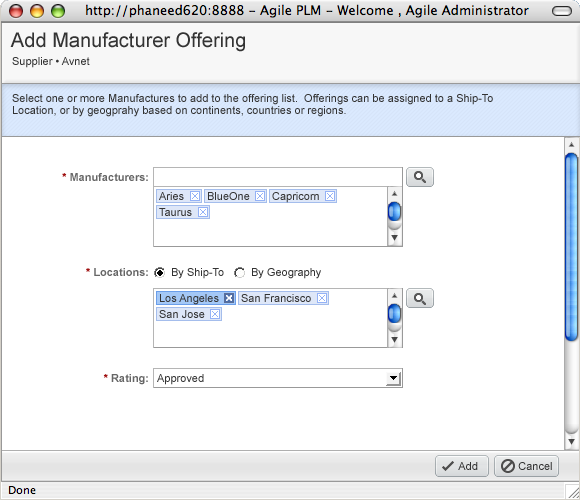
<style>
.page{position:relative;width:580px;height:500px;background:#ffffff}
.page>*{position:absolute;margin:0}
.t1{font:20px "ArialMT";color:#333333}
.t2{font:11px "ArialMT";color:#333333}
.t3{font:11px/12px "ArialMT";color:#333333}
.t4{font:11px "Arial-BoldMT";color:#666666}
.t5{font:11px "ArialMT";color:#666666}
.t6{font:11px "Arial-BoldMT";color:#990000}
</style>
<div class="page">
<p class="t1" style="left:10px;top:32px;width:235px;height:20px">Add Manufacturer Offering</p>
<p class="t2" style="left:12px;top:57px;width:78px;height:11px">Supplier • Avnet</p>
<p class="t3" style="left:12px;top:94px;width:481px;height:23px">Select one or more Manufactures to add to the offering list.  Offerings can be assigned to a Ship-To<br>Location, or by geogprahy based on continents, countries or regions.</p>
<p class="t4" style="left:62px;top:173px;width:86px;height:8px"><span class="t5"> </span><span class="t6">* </span>Manufacturers:</p>
<p class="t2" style="left:159px;top:192px;width:25px;height:8px">Aries</p>
<p class="t4" style="left:86px;top:268px;width:62px;height:8px"><span class="t6">*</span> Locations:</p>
<p class="t2" style="left:172px;top:268px;width:52px;height:11px">By Ship-To</p>
<p class="t2" style="left:252px;top:268px;width:69px;height:11px">By Geography</p>
<p class="t2" style="left:160px;top:294px;width:59px;height:11px">Los Angeles</p>
<p class="t2" style="left:241px;top:294px;width:70px;height:8px">San Francisco</p>
<p class="t2" style="left:159px;top:310px;width:46px;height:8px">San Jose</p>
<p class="t4" style="left:103px;top:374px;width:45px;height:11px"><span class="t6">*</span> Rating:</p>
<p class="t2" style="left:157px;top:374px;width:47px;height:11px">Approved</p>
<p class="t2" style="left:458px;top:462px;width:20px;height:8px">Add</p>
<p class="t2" style="left:518px;top:462px;width:34px;height:8px">Cancel</p>
</div>
